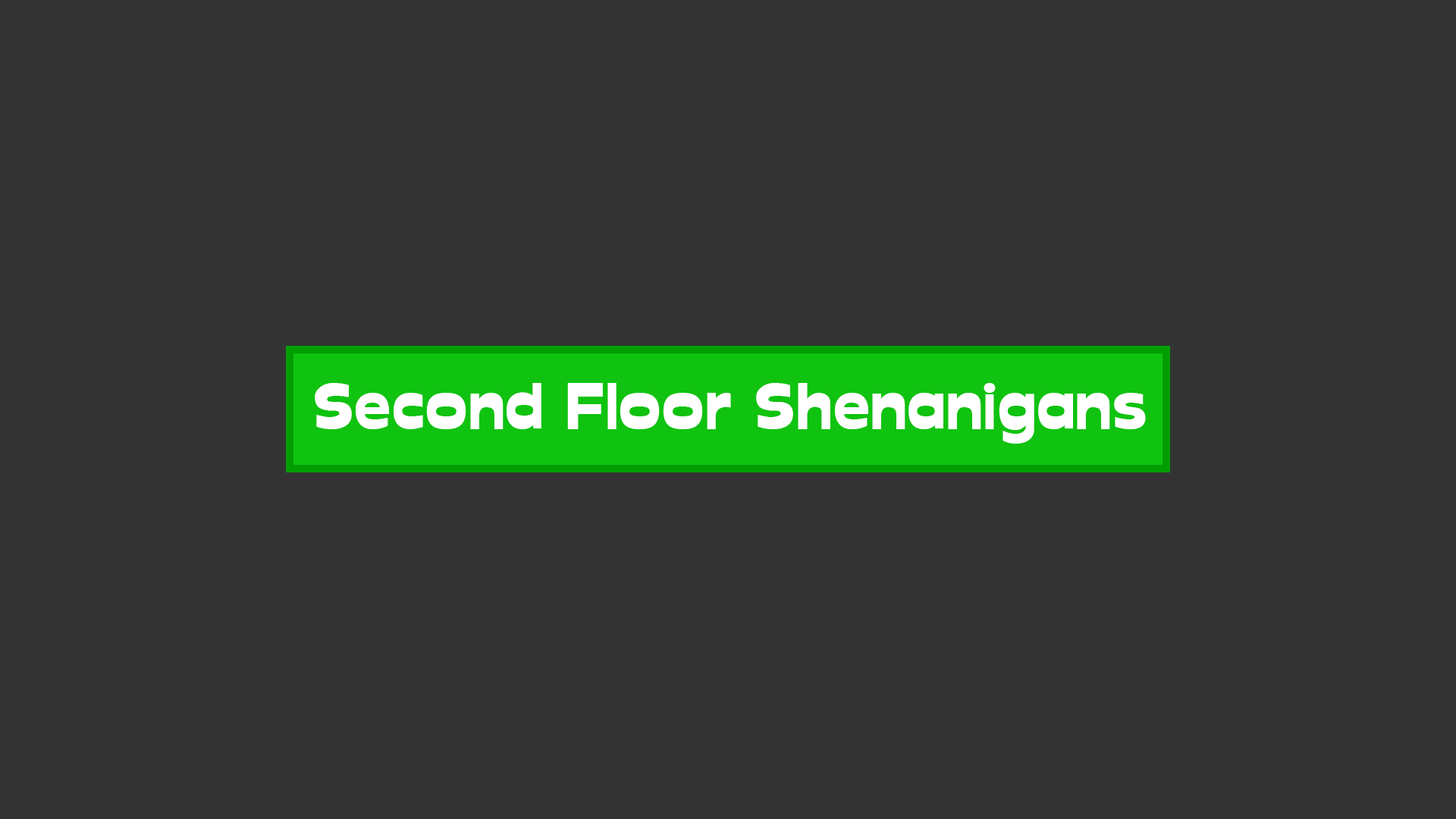
<style>
.page{position:relative;width:1456px;height:819px;background:#333333}
.page>*{position:absolute;margin:0}
.t1{font:63.2px "Glockenspiel";color:#ffffff}
</style>
<div class="page">
<p class="t1" style="left:315px;top:383px;width:831px;height:61px">Second Floor Shenanigans</p>
</div>
